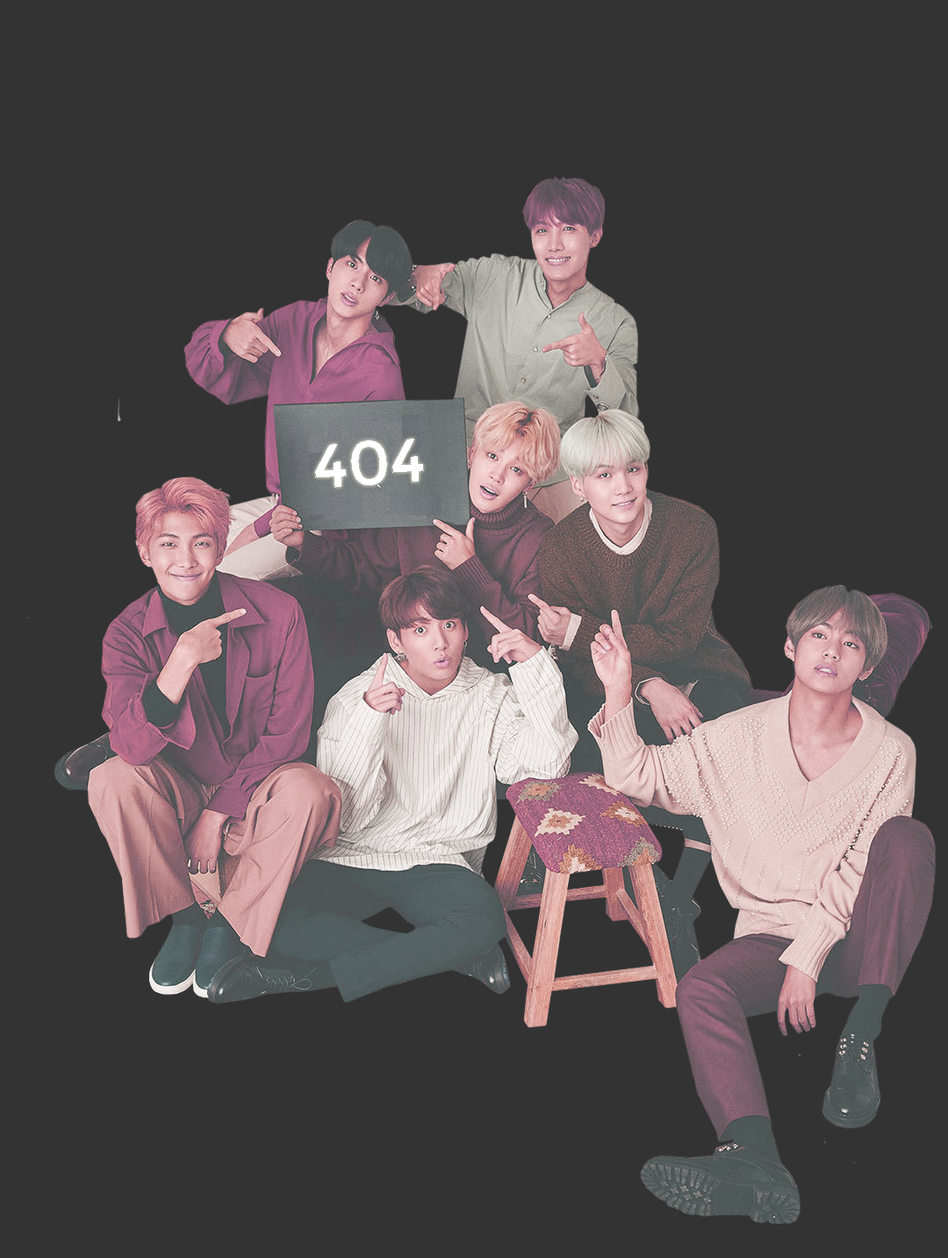
<style>
.page{position:relative;width:948px;height:1258px;background:#333333}
.page>*{position:absolute;margin:0}
.t1{font:61.1px "Montserrat-Regular";color:#ffffff}
</style>
<div class="page">
<p class="t1" style="left:315px;top:439px;width:109px;height:49px;rotate:-4deg">404</p>
</div>
